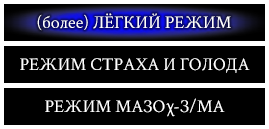
<style>
.page{position:relative;width:269px;height:129px;background:#000000}
.page>*{position:absolute;margin:0}
.t1{font:18px "CrimsonText-Regular";color:#ffffff}
</style>
<div class="page">
<p class="t1" style="left:37px;top:13px;width:194px;height:18px">(более) ЛЁГКИЙ РЕЖИМ</p>
<p class="t1" style="left:20px;top:58px;width:230px;height:15px">РЕЖИМ СТРАХА И ГОЛОДА</p>
<p class="t1" style="left:45px;top:98px;width:180px;height:15px">РЕЖИМ МАЗО  -З/МА</p>
</div>
